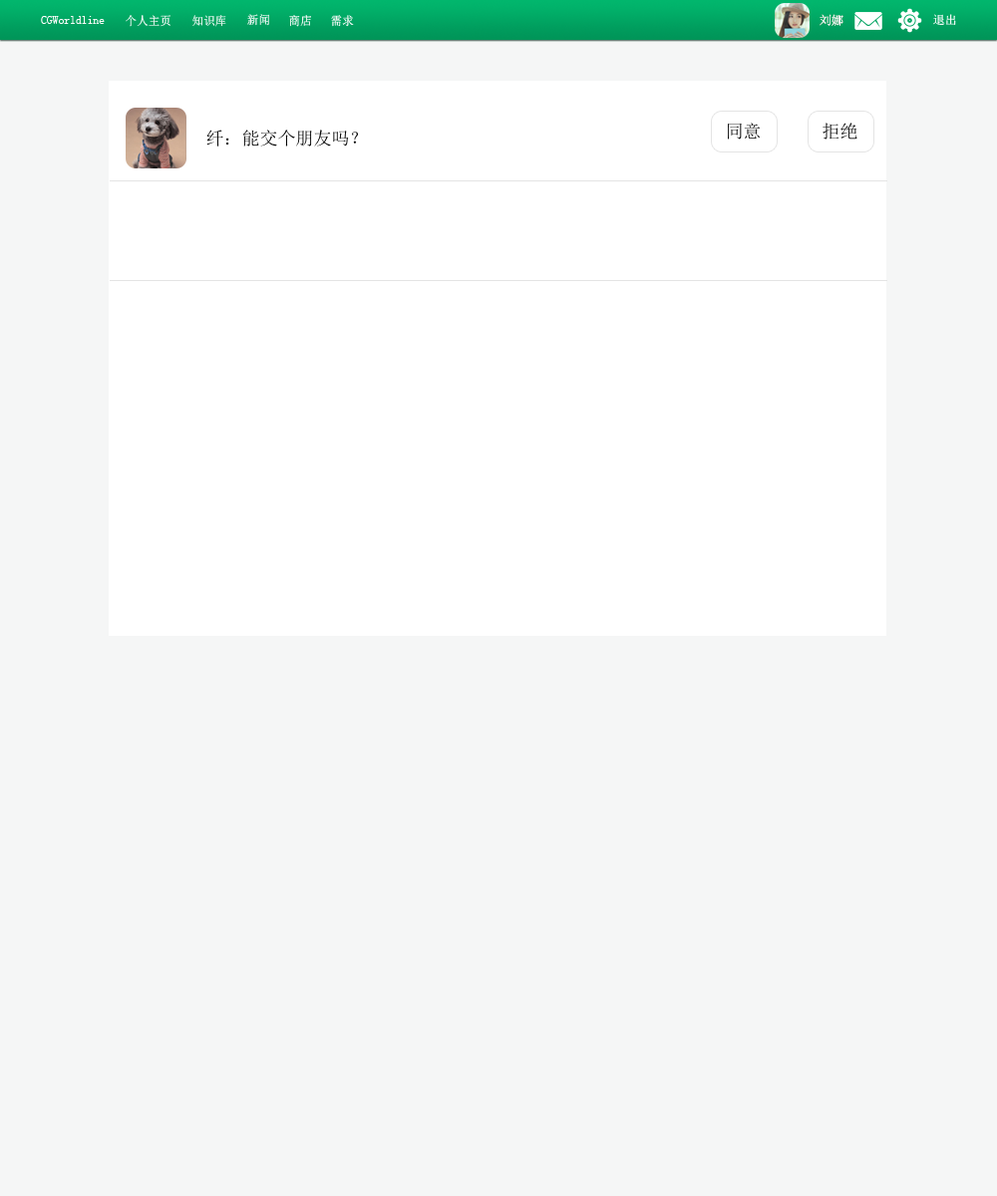
<style>
.page{position:relative;width:997px;height:1196px;background:#f5f6f6}
.page>*{position:absolute;margin:0}
.t1{font:12px "SimSun";color:#fdfcfc;scale:0.97 1}
.t2{font:12px "SimSun";scale:0.97 1}
.t3{font:12px "SimSun";color:#fdfbfb}
.t4{font:12px "SimSun";color:#ffffff}
.t5{font:17.9px "SimSun";color:#040404}
</style>
<div class="page">
<p class="t1" style="left:41px;top:16px;width:64px;height:8px">CGWorldline</p>
<p class="t2" style="left:126px;top:15px;width:44px;height:12px">个人主页</p>
<p class="t2" style="left:192px;top:15px;width:34px;height:12px">知识库</p>
<p class="t2" style="left:247px;top:14px;width:22px;height:12px">新闻</p>
<p class="t2" style="left:289px;top:15px;width:22px;height:12px">商店</p>
<p class="t2" style="left:331px;top:15px;width:23px;height:12px">需求</p>
<p class="t3" style="left:819px;top:14px;width:24px;height:12px">刘娜</p>
<p class="t4" style="left:933px;top:14px;width:23px;height:11px">退出</p>
<p class="t5" style="left:728px;top:123px;width:33px;height:17px">同意</p>
<p class="t5" style="left:822px;top:123px;width:35px;height:17px">拒绝</p>
<p class="t5" style="left:206px;top:130px;width:152px;height:17px">纤：能交个朋友吗？</p>
</div>
